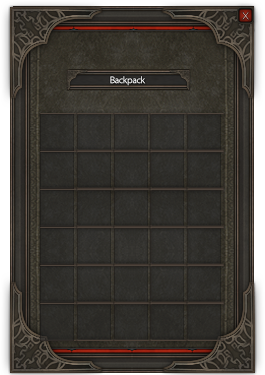
<style>
.page{position:relative;width:265px;height:375px}
.page>*{position:absolute;margin:0}
.t1{font:9.8px "Gotham-Light";letter-spacing:-0.05em}
.t2{font:9.8px "MyriadPro-Regular";letter-spacing:-0.05em}
</style>
<div class="page">
<p class="t1" style="left:242px;top:12px;width:7px;height:8px">X</p>
<p class="t2" style="left:110px;top:76px;width:36px;height:10px">Backpack</p>
</div>
